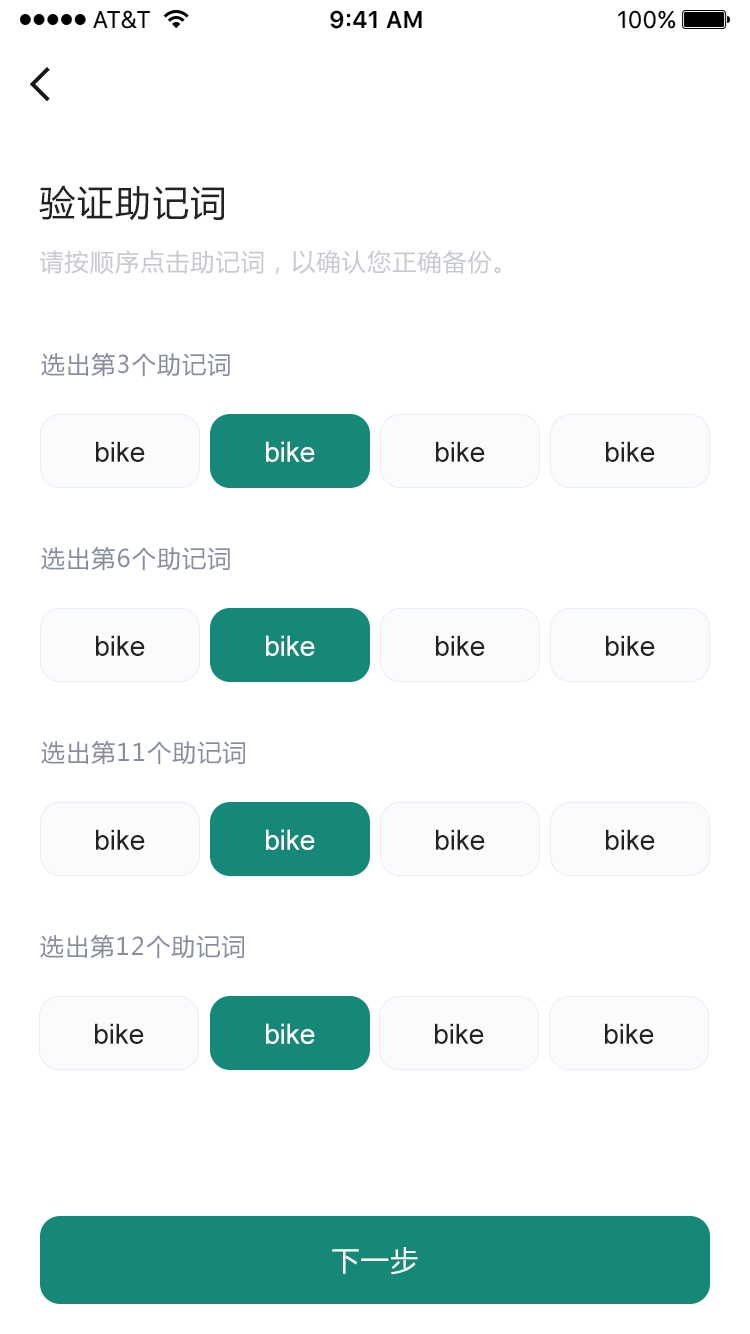
<style>
.page{position:relative;width:750px;height:1334px;background:#ffffff}
.page>*{position:absolute;margin:0}
.t1{font:36px "MicrosoftYaHei";letter-spacing:0.05em;color:#222222}
.t2{font:24px "MicrosoftYaHei";letter-spacing:0.05em;color:#c8cad2}
.t3{font:24px "MicrosoftYaHei";letter-spacing:0.05em;color:#878e9f}
.t4{font:28px "ArialMT";color:#222222}
.t5{font:28px "ArialMT";color:#ffffff}
.t6{font:28px "MicrosoftYaHei";letter-spacing:0.05em;color:#ffffff}
</style>
<div class="page">
<p class="t1" style="left:39px;top:185px;width:185px;height:36px">验证助记词</p>
<p class="t2" style="left:40px;top:250px;width:461px;height:24px">请按顺序点击助记词，以确认您正确备份。</p>
<p class="t3" style="left:41px;top:353px;width:189px;height:24px">选出第3个助记词</p>
<p class="t4" style="left:96px;top:441px;width:49px;height:21px">bike</p>
<p class="t5" style="left:266px;top:441px;width:49px;height:21px">bike</p>
<p class="t4" style="left:436px;top:441px;width:49px;height:21px">bike</p>
<p class="t4" style="left:606px;top:441px;width:49px;height:21px">bike</p>
<p class="t3" style="left:41px;top:547px;width:189px;height:24px">选出第6个助记词</p>
<p class="t4" style="left:96px;top:635px;width:49px;height:21px">bike</p>
<p class="t5" style="left:266px;top:635px;width:49px;height:21px">bike</p>
<p class="t4" style="left:436px;top:635px;width:49px;height:21px">bike</p>
<p class="t4" style="left:606px;top:635px;width:49px;height:21px">bike</p>
<p class="t3" style="left:41px;top:741px;width:204px;height:24px">选出第11个助记词</p>
<p class="t4" style="left:96px;top:829px;width:49px;height:21px">bike</p>
<p class="t5" style="left:266px;top:829px;width:49px;height:21px">bike</p>
<p class="t4" style="left:436px;top:829px;width:49px;height:21px">bike</p>
<p class="t4" style="left:606px;top:829px;width:49px;height:21px">bike</p>
<p class="t3" style="left:40px;top:935px;width:204px;height:24px">选出第12个助记词</p>
<p class="t4" style="left:95px;top:1023px;width:49px;height:21px">bike</p>
<p class="t5" style="left:266px;top:1023px;width:49px;height:21px">bike</p>
<p class="t4" style="left:435px;top:1023px;width:49px;height:21px">bike</p>
<p class="t4" style="left:605px;top:1023px;width:49px;height:21px">bike</p>
<p class="t6" style="left:332px;top:1247px;width:86px;height:28px">下一步</p>
</div>
